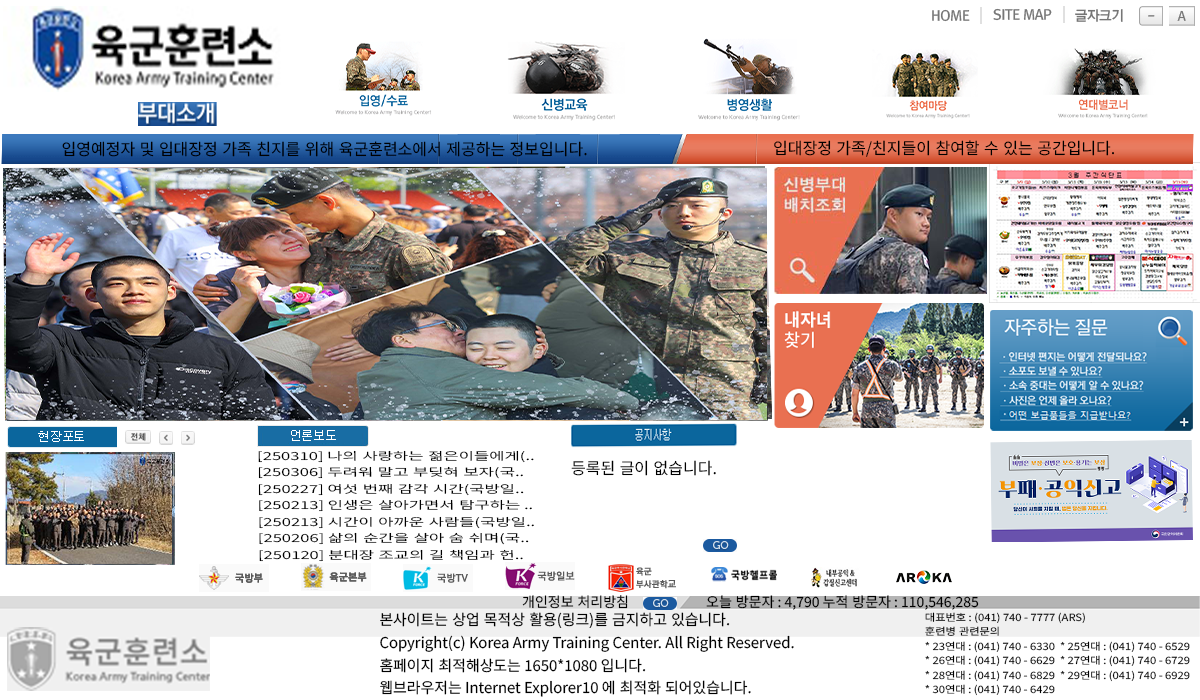
<style>
.page{position:relative;width:1200px;height:700px;background:#ffffff}
.page>*{position:absolute;margin:0}
.t1{font:16px "NotoSansKR-Regular";color:#000000}
.t2{font:11px/16.5px "NotoSansKR-Regular";color:#000000;scale:1.5 1}
.t3{font:14px "NotoSansKR-Regular";color:#000000}
.t4{font:14.9px/22.9px "NotoSansKR-Regular";color:#000000}
.t5{font:10px/14.6px "NotoSansKR-Regular";color:#000000;scale:1.12 1}
</style>
<div class="page">
<p class="t1" style="left:62px;top:141px;width:525px;height:16px">입영예정자 및 입대장정 가족 친지를 위해 육군훈련소에서 제공하는 정보입니다.</p>
<p class="t1" style="left:774px;top:140px;width:340px;height:17px">입대장정 가족/친지들이 참여할 수 있는 공간입니다.</p>
<p class="t2" style="left:258px;top:450px;width:276px;height:112px">[250310] 나의 사랑하는 젊은이들에게(..<br>[250306] 두려워 말고 부딪혀 보자(국..<br>[250227] 여섯 번째 감각 시간(국방일..<br>[250213] 인생은 살아가면서 탐구하는 ..<br>[250213] 시간이 아까운 사람들(국방일..<br>[250206] 삶의 순간을 살아 숨 쉬며(국..<br>[250120] 분대장 조교의 길 책임과 헌..</p>
<p class="t1" style="left:571px;top:460px;width:145px;height:16px">등록된 글이 없습니다.</p>
<p class="t3" style="left:522px;top:595px;width:106px;height:14px">개인정보 처리방침</p>
<p class="t3" style="left:706px;top:595px;width:273px;height:15px">오늘 방문자 : 4,790 누적 방문자 : 110,546,285</p>
<p class="t4" style="left:380px;top:612px;width:414px;height:85px">본사이트는 상업 목적상 활용(링크)를 금지하고 있습니다.<br>Copyright(c) Korea Army Training Center. All Right Reserved.<br>홈페이지 최적해상도는 1650*1080 입니다.<br>웹브라우저는 Internet Explorer10 에 최적화 되어있습니다.</p>
<p class="t5" style="left:925px;top:612px;width:265px;height:84px">대표번호 : (041) 740 - 7777 (ARS)<br>훈련병 관련문의<br>* 23연대 : (041) 740 - 6330  * 25연대 : (041) 740 - 6529  <br>* 26연대 : (041) 740 - 6629  * 27연대 : (041) 740 - 6729<br>* 28연대 : (041) 740 - 6829  * 29연대 : (041) 740 - 6929<br>* 30연대 : (041) 740 - 6429</p>
</div>
